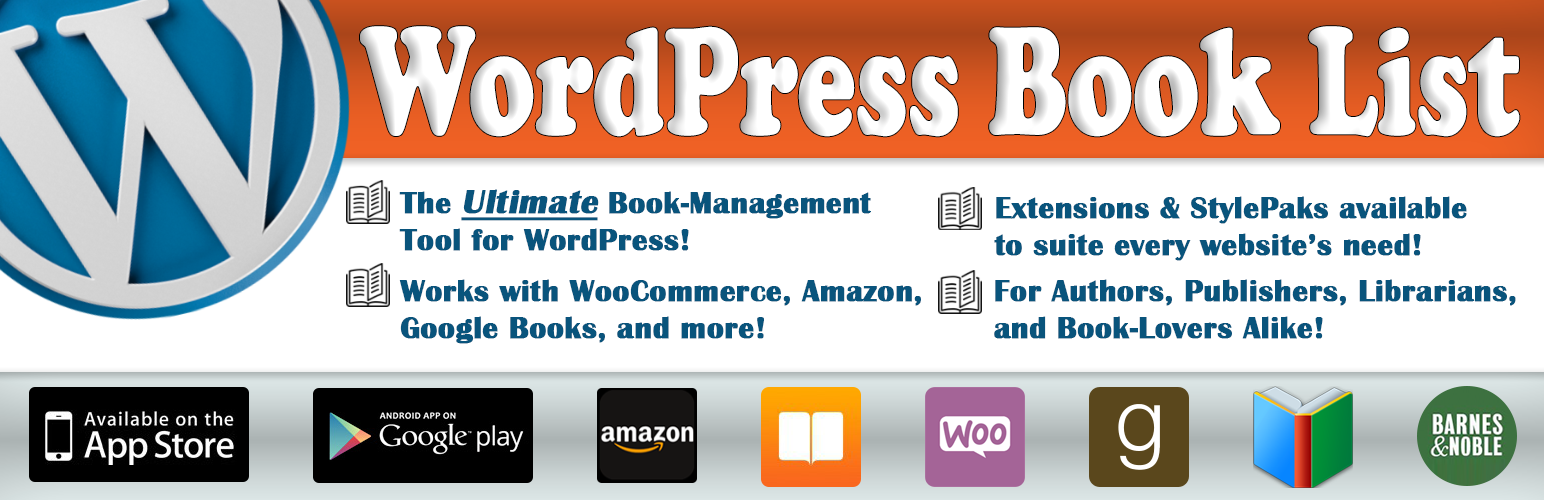
<style>
.page{position:relative;width:1544px;height:500px;background:#ffffff}
.page>*{position:absolute;margin:0}
.t1{font:159.3px "CooperBlack";color:#ffffff;scale:0.69 1}
.t2{font:31px "BritannicBold";color:#09547c;font-weight:bold}
.t3{font:35px "BritannicBold";color:#09547c;font-weight:bold;font-style:italic;text-decoration:underline}
</style>
<div class="page">
<p class="t1" style="left:360px;top:26px;width:1160px;height:111px">WordPress Book List</p>
<p class="t2" style="left:399px;top:189px;width:472px;height:62px">The <span class="t3">Ultimate</span> Book-Management<br>Tool for WordPress!</p>
<p class="t2" style="left:994px;top:196px;width:473px;height:65px">Extensions &amp; StylePaks available<br>to suite every website’s need!</p>
<p class="t2" style="left:399px;top:279px;width:522px;height:65px">Works with WooCommerce, Amazon, <br>Google Books, and more!</p>
<p class="t2" style="left:994px;top:279px;width:522px;height:60px">For Authors, Publishers, Librarians,<br>and Book-Lovers Alike!</p>
</div>
